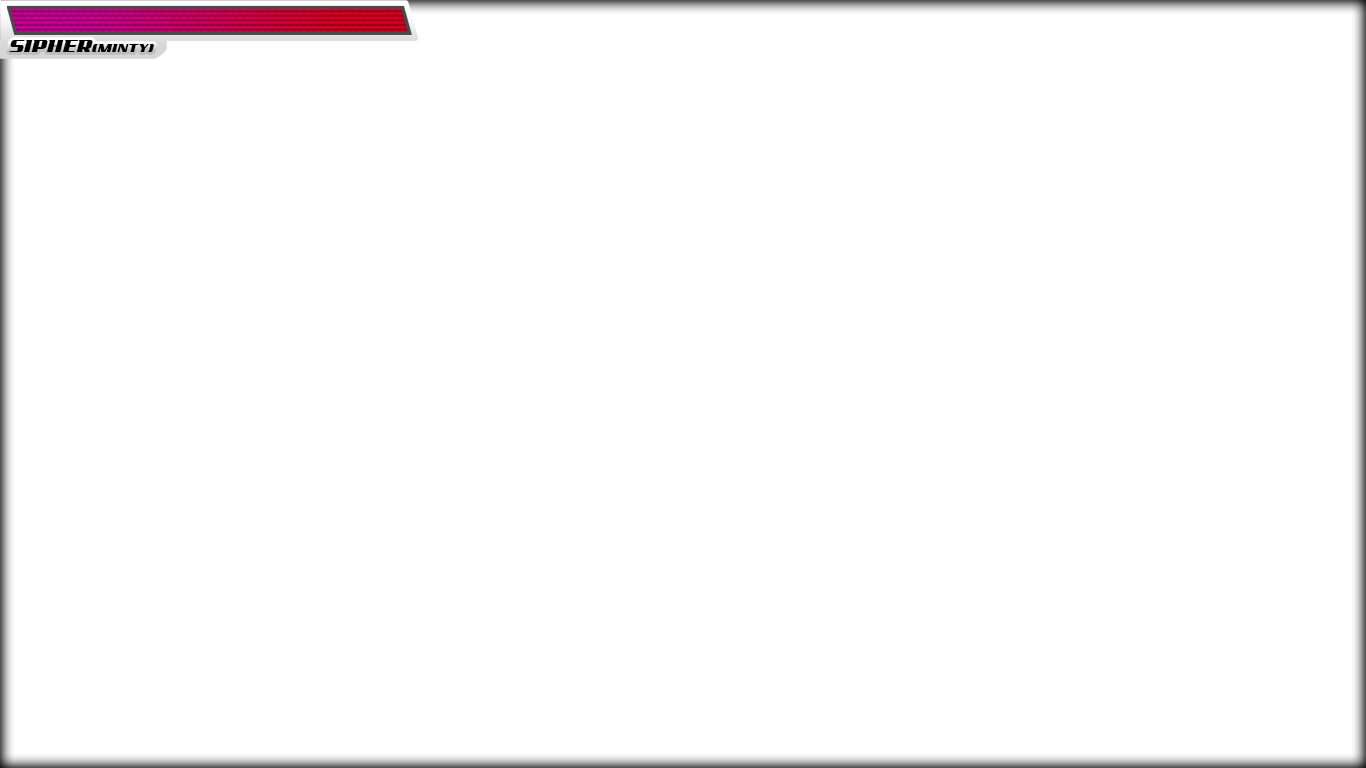
<style>
.page{position:relative;width:1366px;height:768px;background:#ffffff}
.page>*{position:absolute;margin:0}
.t1{font:16.2px "AddCityboyNormal";color:#000000}
.t2{font:24px "AddCityboyNormal";color:#000000}
</style>
<div class="page">
<p class="t1" style="left:9px;top:40px;width:145px;height:12px"><span class="t2">SIPHER</span>(MINTY)</p>
</div>
